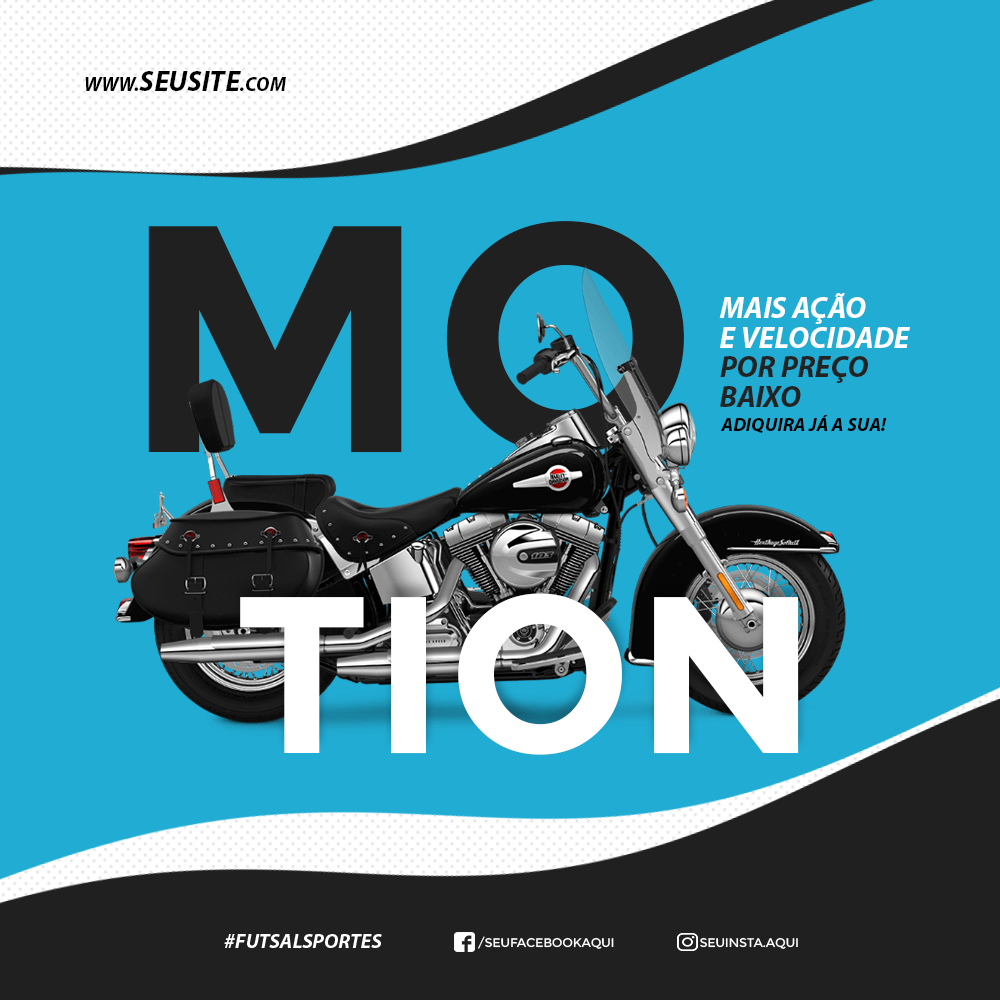
<style>
.page{position:relative;width:1000px;height:1000px;background:#21acd3}
.page>*{position:absolute;margin:0}
.t1{font:28.6px "MyriadPro-BoldIt";color:#000000}
.t2{font:19.7px "MyriadPro-BoldIt";color:#000000}
.t3{font:323.4px "Montserrat-Bold";letter-spacing:0.01em;color:#202020}
.t4{font:30px/29.8px "MyriadPro-BoldIt";color:#ffffff}
.t5{font:30px/29.8px "MyriadPro-BoldIt";color:#232323}
.t6{font:19px "MyriadPro-BoldIt";color:#000000}
.t7{font:223.3px "Montserrat-Bold";letter-spacing:0.01em;color:#ffffff}
.t8{font:20.3px "MyriadPro-BoldIt";color:#ffffff}
.t9{font:12.6px "Montserrat-Regular";letter-spacing:-0.025em;color:#ffffff;text-transform:uppercase}
</style>
<div class="page">
<p class="t1" style="left:85px;top:71px;width:201px;height:20px"><span class="t2">WWW.</span>SEUSITE<span class="t2">.COM</span></p>
<p class="t3" style="left:148px;top:221px;width:536px;height:234px">MO</p>
<p class="t4" style="left:719px;top:293px;width:191px;height:114px">MAIS AÇÃO <br>E VELOCIDADE<br><span class="t5">POR PREÇO<br>BAIXO</span></p>
<p class="t6" style="left:720px;top:415px;width:167px;height:18px">ADIQUIRA JÁ A SUA!</p>
<p class="t7" style="left:240px;top:593px;width:559px;height:162px">TION</p>
<p class="t8" style="left:224px;top:934px;width:158px;height:14px">#FUTSALSPORTES</p>
<p class="t9" style="left:477px;top:936px;width:137px;height:13px">/SEUFACEBOOKAQUI</p>
<p class="t9" style="left:700px;top:937px;width:98px;height:12px">SEUINSTA.AQUI</p>
</div>
